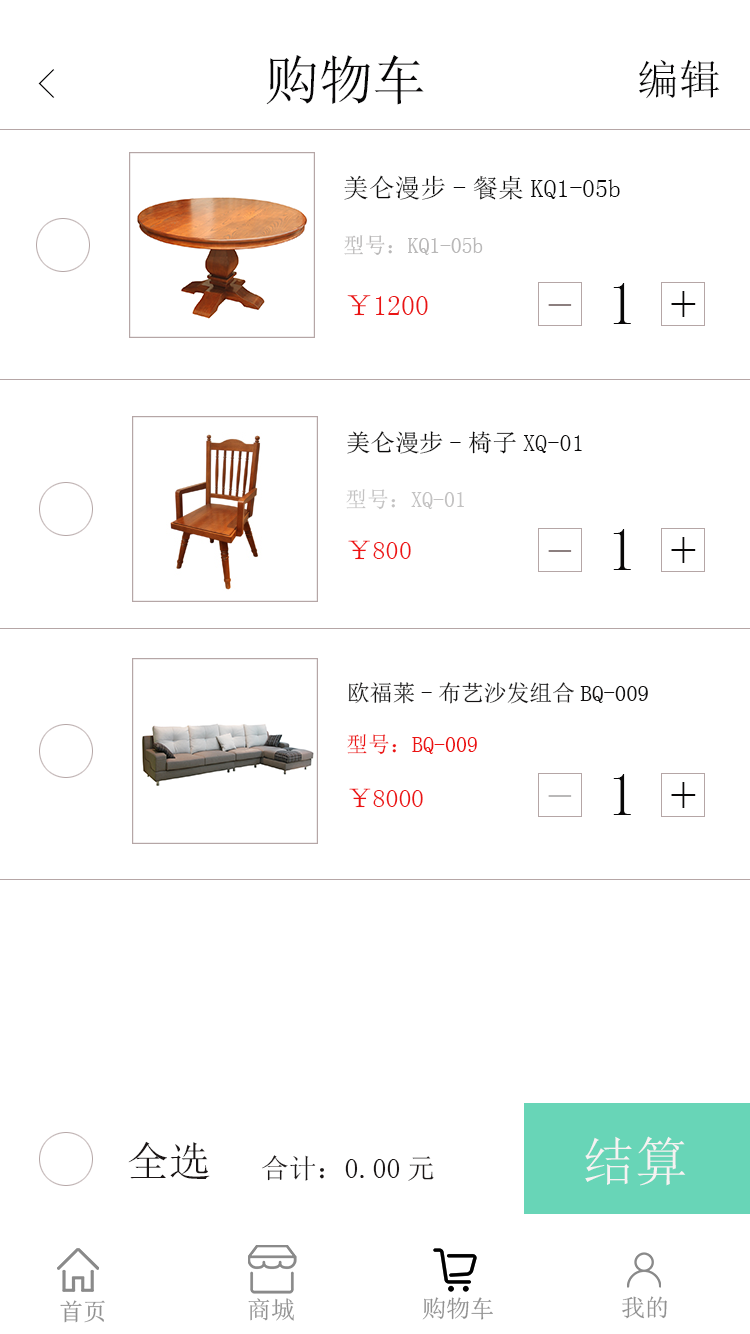
<style>
.page{position:relative;width:750px;height:1334px;background:#ffffff}
.page>*{position:absolute;margin:0}
.t1{font:53.8px "SimSun";color:#080708}
.t2{font:41.8px "SimSun";color:#080708}
.t3{font:42.8px "SimSun";color:#080708}
.t4{font:25.9px "SimSun";color:#090808}
.t5{font:21.9px "SimSun";color:#b9b8b8}
.t6{font:61.8px "SimSun";color:#090808}
.t7{font:54.8px "SimSun";color:#090808}
.t8{font:27.9px "SimSun";color:#ea1414}
.t9{font:51.8px "SimSun";color:#8c7f7f}
.t10{font:23.9px "SimSun";color:#0b0a0a}
.t11{font:21.9px "SimSun";color:#c3c2c2}
.t12{font:25.9px "SimSun";color:#ee1313}
.t13{font:22.9px "SimSun";color:#141212}
.t14{font:21.9px "SimSun";color:#ec1313}
.t15{font:25.9px "SimSun";color:#ec1313}
.t16{font:51.8px "SimSun";color:#b9b8b8}
.t17{font:41.8px "SimSun";color:#1a1515}
.t18{font:52.8px "SimSun";color:#f6f2f2}
.t19{font:27.9px "SimSun";color:#1a1515}
.t20{font:24px "SimSun";color:#909090}
</style>
<div class="page">
<p class="t1" style="left:266px;top:55px;width:158px;height:50px">购物车</p>
<p class="t2" style="left:639px;top:59px;width:81px;height:40px">编辑</p>
<p class="t3" style="left:38px;top:69px;width:17px;height:29px">&lt;</p>
<p class="t4" style="left:344px;top:175px;width:276px;height:25px">美仑漫步-餐桌KQ1-05b</p>
<p class="t5" style="left:344px;top:235px;width:139px;height:20px">型号：KQ1-05b</p>
<p class="t6" style="left:613px;top:283px;width:18px;height:41px">1</p>
<p class="t7" style="left:671px;top:291px;width:25px;height:26px">+</p>
<p class="t8" style="left:347px;top:295px;width:81px;height:21px">￥1200</p>
<p class="t9" style="left:548px;top:304px;width:24px;height:2px">-</p>
<p class="t10" style="left:347px;top:431px;width:235px;height:23px">美仑漫步-椅子XQ-01</p>
<p class="t11" style="left:346px;top:489px;width:118px;height:21px">型号：XQ-01</p>
<p class="t6" style="left:613px;top:529px;width:18px;height:41px">1</p>
<p class="t12" style="left:348px;top:540px;width:63px;height:20px">￥800</p>
<p class="t7" style="left:671px;top:537px;width:25px;height:26px">+</p>
<p class="t9" style="left:548px;top:550px;width:24px;height:2px">-</p>
<p class="t13" style="left:348px;top:682px;width:300px;height:22px">欧福莱-布艺沙发组合BQ-009</p>
<p class="t14" style="left:347px;top:734px;width:130px;height:21px">型号：BQ-009</p>
<p class="t6" style="left:613px;top:774px;width:18px;height:41px">1</p>
<p class="t7" style="left:671px;top:782px;width:25px;height:26px">+</p>
<p class="t15" style="left:349px;top:788px;width:74px;height:20px">￥8000</p>
<p class="t16" style="left:548px;top:795px;width:24px;height:2px">-</p>
<p class="t17" style="left:128px;top:1141px;width:82px;height:38px">全选</p>
<p class="t18" style="left:585px;top:1136px;width:101px;height:50px">结算</p>
<p class="t19" style="left:262px;top:1155px;width:172px;height:26px">合计：0.00元</p>
<p class="t20" style="left:60px;top:1300px;width:45px;height:23px">首页</p>
<p class="t20" style="left:248px;top:1298px;width:46px;height:23px">商城</p>
<p class="t20" style="left:422px;top:1297px;width:71px;height:23px">购物车</p>
<p class="t20" style="left:622px;top:1296px;width:45px;height:23px">我的</p>
</div>
